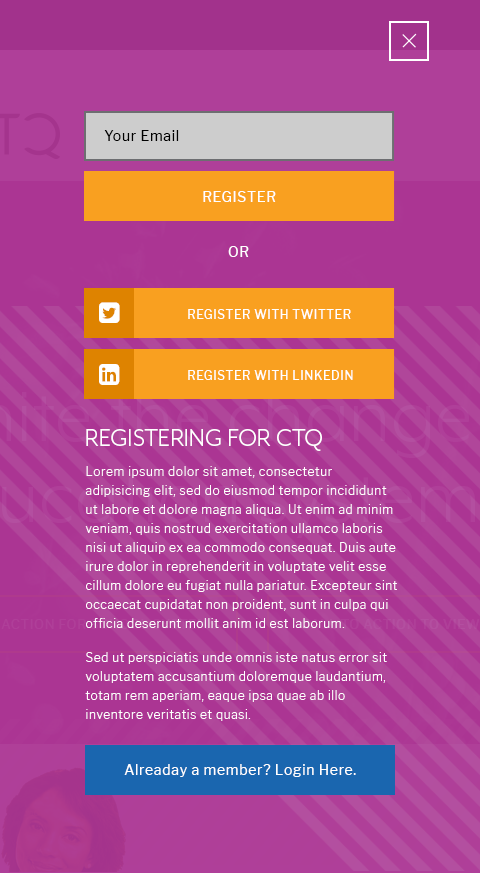
<style>
.page{position:relative;width:480px;height:873px;background:#ab3593}
.page>*{position:absolute;margin:0}
.t1{font:14px "LibreFranklin-Regular";letter-spacing:0.05em;color:#000000}
.t2{font:14px "LibreFranklin-Regular";letter-spacing:0.05em;color:#ffffff}
.t3{font:12px "LibreFranklin-Regular";letter-spacing:0.05em;color:#ffffff;text-transform:uppercase}
.t4{font:27px "MrEavesXLModOT-Book";letter-spacing:0.005em;color:#ffffff}
.t5{font:12px/19px "LibreFranklin-Light";letter-spacing:0.05em;color:#ffffff}
</style>
<div class="page">
<p class="t1" style="left:104px;top:130px;width:75px;height:11px">Your Email</p>
<p class="t2" style="left:203px;top:191px;width:73px;height:11px">REGISTER</p>
<p class="t2" style="left:228px;top:246px;width:21px;height:11px">OR</p>
<p class="t3" style="left:188px;top:309px;width:163px;height:10px">REGISTER with Twitter</p>
<p class="t3" style="left:188px;top:370px;width:165px;height:10px">REGISTER with Linkedin</p>
<p class="t4" style="left:86px;top:429px;width:236px;height:22px">REGISTERING FOR CTQ</p>
<p class="t5" style="left:85px;top:466px;width:312px;height:255px">Lorem ipsum dolor sit amet, consectetur adipisicing elit, sed do eiusmod tempor incididunt ut labore et dolore magna aliqua. Ut enim ad minim veniam, quis nostrud exercitation ullamco laboris nisi ut aliquip ex ea commodo consequat. Duis aute irure dolor in reprehenderit in voluptate velit esse cillum dolore eu fugiat nulla pariatur. Excepteur sint occaecat cupidatat non proident, sunt in culpa qui officia deserunt mollit anim id est laborum. <br>Sed ut perspiciatis unde omnis iste natus error sit voluptatem accusantium doloremque laudantium, totam rem aperiam, eaque ipsa quae ab illo inventore veritatis et quasi.</p>
<p class="t2" style="left:124px;top:764px;width:232px;height:13px">Alreaday a member? Login Here.</p>
</div>
